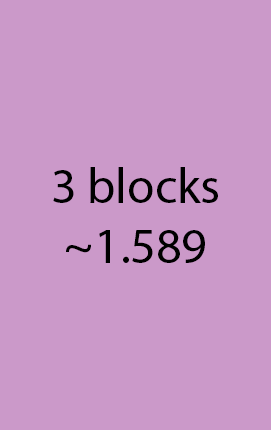
<style>
.page{position:relative;width:271px;height:430px;background:#cb99c9}
.page>*{position:absolute;margin:0}
.t1{font:12px "MyriadPro-Regular";color:#000000}
</style>
<div class="page">
<p class="t1" style="left:53px;top:167px;width:165px;height:96px;text-align:center">3 blocks<br>~1.589</p>
</div>
